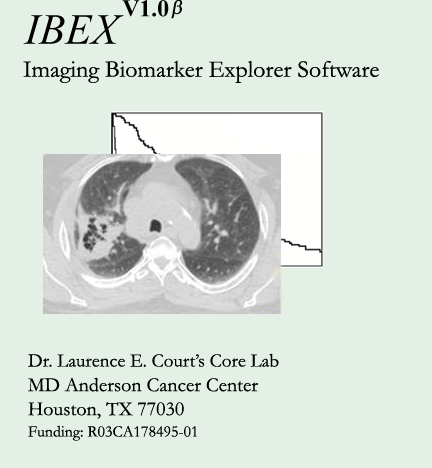
<style>
.page{position:relative;width:432px;height:468px;background:#e4f0e6}
.page>*{position:absolute;margin:0}
.t1{font:24px "TimesNewRomanPS-BoldMT";color:#000000}
.t2{font:43px "TimesNewRomanPS-ItalicMT";color:#000000}
.t3{font:24px "Garamond";color:#000000}
.t4{font:19.1px "Garamond";color:#000000}
.t5{font:16px "Garamond";color:#000000}
</style>
<div class="page">
<p class="t1" style="left:122px;top:0px;width:47px;height:17px">V1.0</p>
<p class="t2" style="left:23px;top:15px;width:101px;height:29px">IBEX</p>
<p class="t3" style="left:23px;top:60px;width:356px;height:23px">Imaging Biomarker Explorer Software</p>
<p class="t4" style="left:28px;top:353px;width:251px;height:14px">Dr. Laurence E. Court’s Core Lab</p>
<p class="t4" style="left:28px;top:377px;width:230px;height:15px">MD Anderson Cancer Center</p>
<p class="t4" style="left:28px;top:402px;width:156px;height:17px">Houston, TX 77030</p>
<p class="t5" style="left:28px;top:425px;width:169px;height:16px">Funding: R03CA178495-01</p>
</div>
